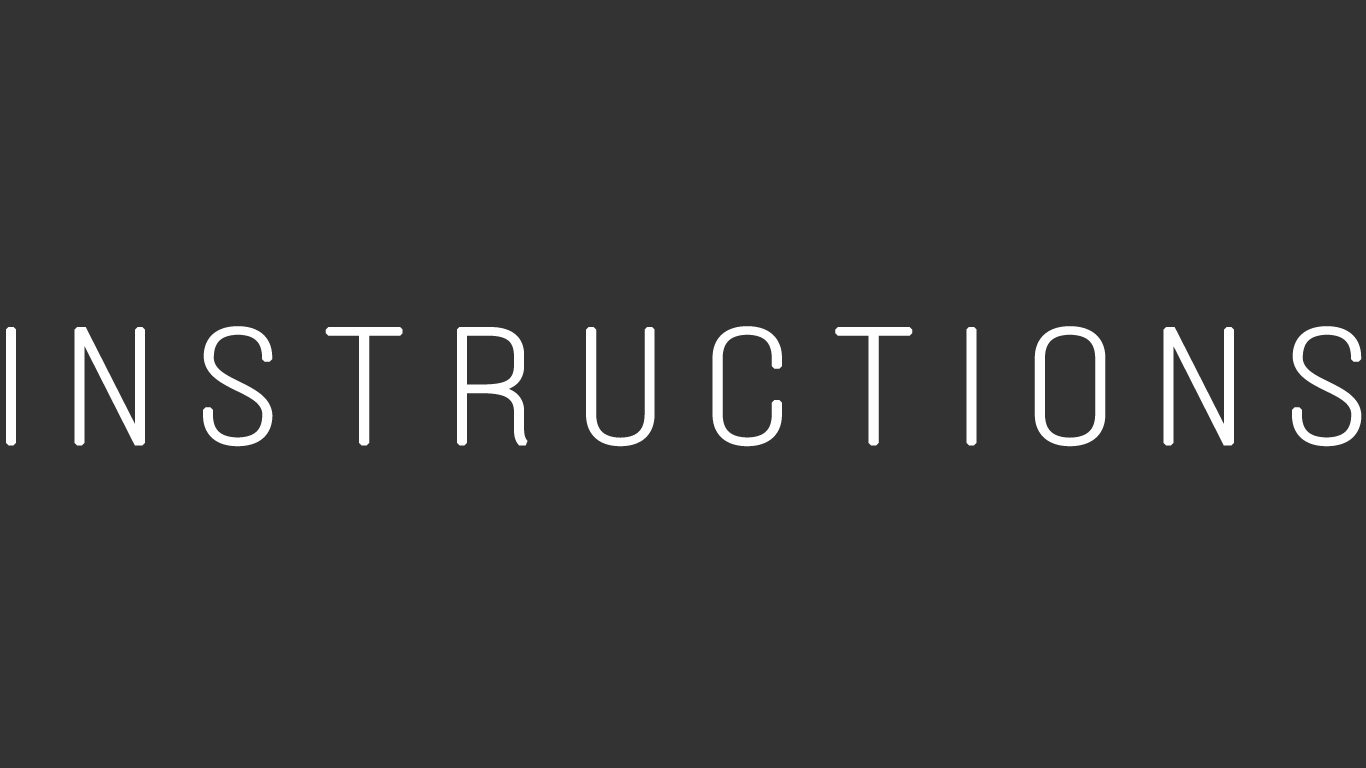
<style>
.page{position:relative;width:1366px;height:768px;background:#333333}
.page>*{position:absolute;margin:0}
.t1{font:161.5px "BebasNeueLight";letter-spacing:0.185em;color:#ffffff;font-weight:bold;scale:1.35 1}
</style>
<div class="page">
<p class="t1" style="left:6px;top:326px;width:1356px;height:121px">InStructions</p>
</div>
